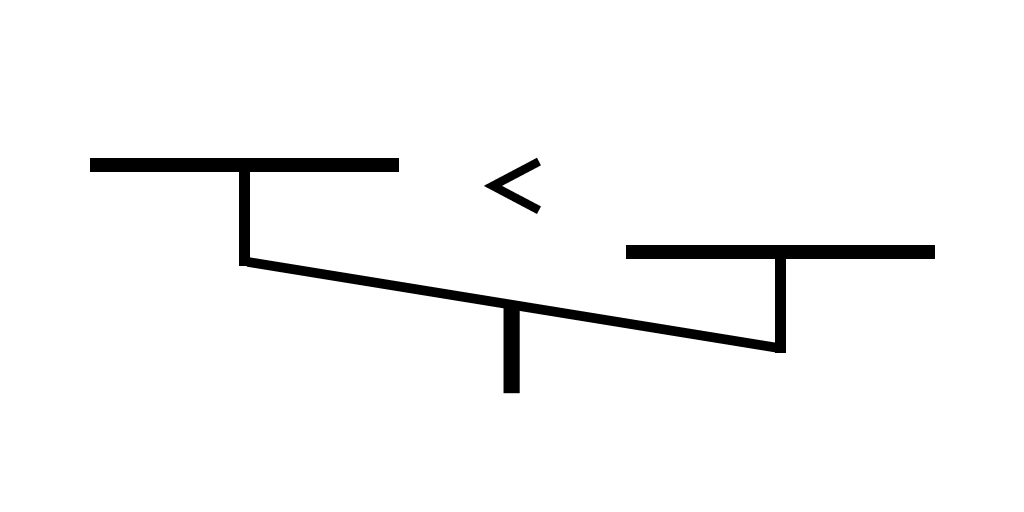
<style>
.page{position:relative;width:1024px;height:512px;background:#ffffff}
.page>*{position:absolute;margin:0}
.t1{font:72px "KozGoPr6N-Heavy";color:#000000}
</style>
<div class="page">
<p class="t1" style="left:484px;top:157px;width:57px;height:57px">＜</p>
</div>
